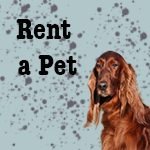
<style>
.page{position:relative;width:150px;height:150px;background:#b1c6c8}
.page>*{position:absolute;margin:0}
.t1{font:30px "AmericanTypewriter-CondensedBold";color:#020202}
</style>
<div class="page">
<p class="t1" style="left:16px;top:19px;width:61px;height:56px;text-align:center">Rent <br>a Pet</p>
</div>
